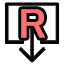
<style>
.page{position:relative;width:64px;height:64px;background:#ffffff}
.page>*{position:absolute;margin:0}
.t1{font:42px "MS-PGothic";color:#ff7171;font-weight:bold}
</style>
<div class="page">
<p class="t1" style="left:21px;top:9px;width:24px;height:29px">R</p>
</div>
